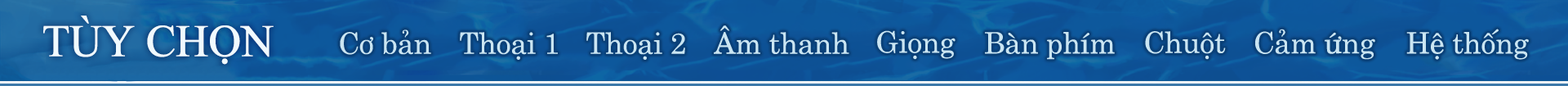
<style>
.page{position:relative;width:1568px;height:86px}
.page>*{position:absolute;margin:0}
.t1{font:44.9px "TimesNewRomanPSMT";letter-spacing:-0.025em;color:#f0faff;font-weight:bold}
.t2{font:29.4px "UTM-Centur";letter-spacing:-0.01em;color:#cae5f2}
</style>
<div class="page">
<p class="t1" style="left:43px;top:16px;width:231px;height:49px">TÙY CHỌN</p>
<p class="t2" style="left:340px;top:29px;width:91px;height:26px">Cơ bản</p>
<p class="t2" style="left:714px;top:25px;width:135px;height:30px">Âm thanh</p>
<p class="t2" style="left:1255px;top:29px;width:120px;height:31px">Cảm ứng</p>
<p class="t2" style="left:1406px;top:29px;width:123px;height:31px">Hệ thống</p>
<p class="t2" style="left:460px;top:32px;width:98px;height:28px">Thoại 1</p>
<p class="t2" style="left:586px;top:32px;width:99px;height:28px">Thoại 2</p>
<p class="t2" style="left:877px;top:30px;width:79px;height:30px">Giọng</p>
<p class="t2" style="left:985px;top:32px;width:130px;height:28px">Bàn phím</p>
<p class="t2" style="left:1145px;top:31px;width:81px;height:29px">Chuột</p>
</div>
